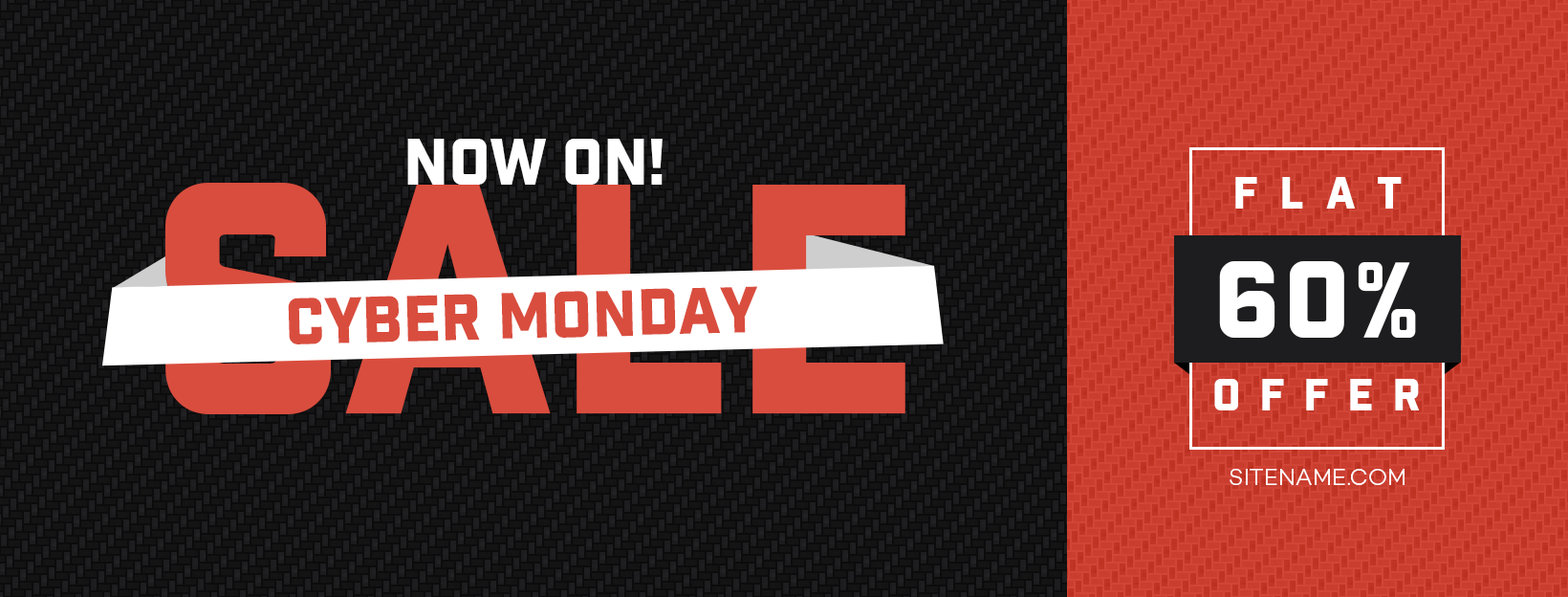
<style>
.page{position:relative;width:1568px;height:597px}
.page>*{position:absolute;margin:0}
.t1{font:63.1px "Industry-Black";color:#ffffff;text-transform:uppercase}
.t2{font:317.4px "Industry-Black";color:#d94d3e;text-transform:uppercase}
.t3{font:44px "Industry-Black";letter-spacing:0.5em;color:#ffffff;text-transform:uppercase}
.t4{font:104.2px "Industry-Black";letter-spacing:0.04em;color:#ffffff;text-transform:uppercase}
.t5{font:63.1px "Industry-Black";color:#d94d3e;text-transform:uppercase}
.t6{font:44px "Industry-Black";letter-spacing:0.42em;color:#ffffff;text-transform:uppercase}
.t7{font:22.9px "Campton-LightDEMO";color:#ffffff;text-transform:uppercase}
</style>
<div class="page">
<p class="t1" style="left:407px;top:139px;width:256px;height:46px">Now on!</p>
<p class="t2" style="left:164px;top:183px;width:741px;height:231px">Sale</p>
<p class="t3" style="left:1235px;top:177px;width:167px;height:31px">Flat</p>
<p class="t4" style="left:1219px;top:261px;width:197px;height:77px">60%</p>
<p class="t5" style="left:288px;top:286px;width:469px;height:58px;rotate:-1deg">cyber monday</p>
<p class="t6" style="left:1214px;top:379px;width:206px;height:31px">Offer</p>
<p class="t7" style="left:1230px;top:468px;width:175px;height:17px">Sitename.com</p>
</div>
